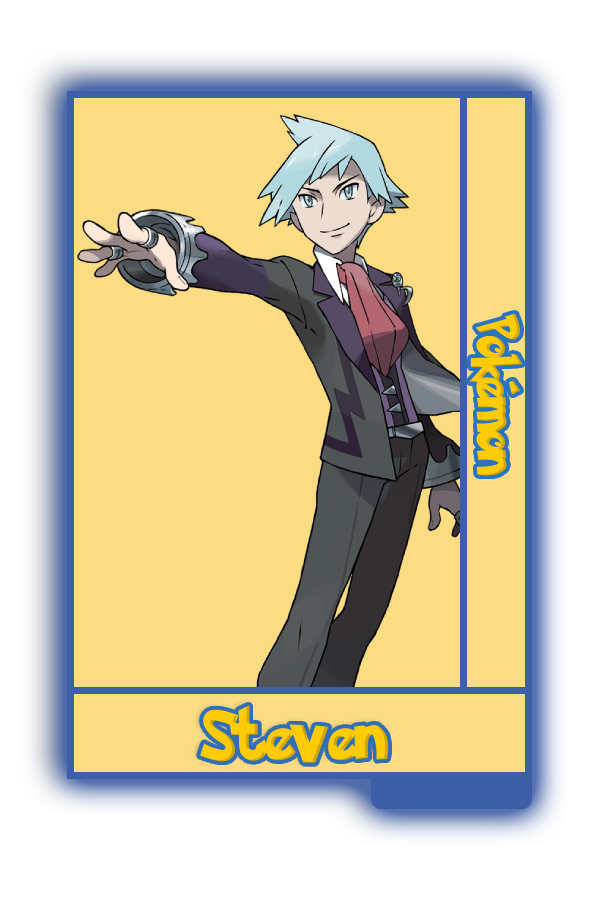
<style>
.page{position:relative;width:600px;height:900px;background:#fbdc83}
.page>*{position:absolute;margin:0}
.t1{font:48.8px "PokemonSolidNormal";color:#ffcb05;scale:0.8 1}
.t2{font:56.6px "PokemonSolidNormal";color:#ffcb05;scale:0.92 1}
</style>
<div class="page">
<p class="t1" style="left:469px;top:313px;width:54px;height:163px;rotate:90deg">Pokémon</p>
<p class="t2" style="left:200px;top:705px;width:189px;height:58px">Steven</p>
</div>
